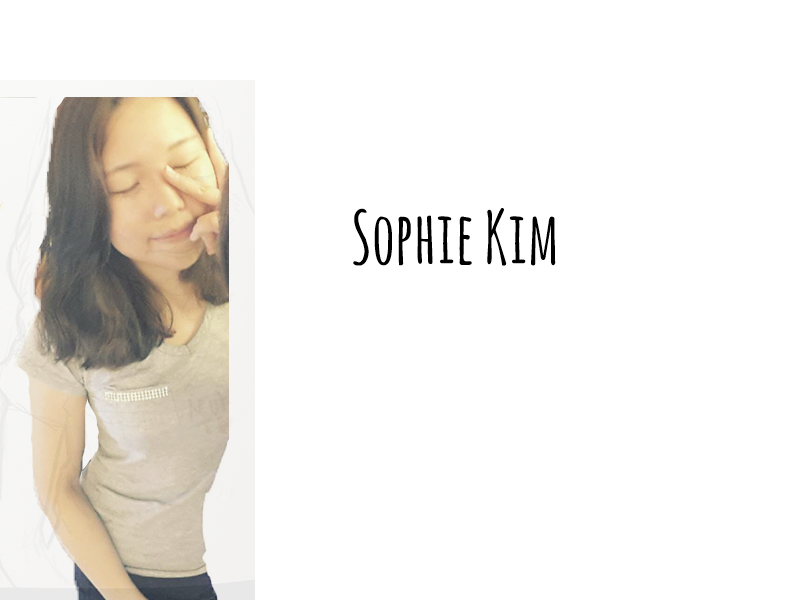
<style>
.page{position:relative;width:800px;height:600px;background:#ffffff}
.page>*{position:absolute;margin:0}
.t1{font:72px "AmaticSC-Bold";color:#000000}
</style>
<div class="page">
<p class="t1" style="left:353px;top:208px;width:203px;height:58px">Sophie Kim</p>
</div>
